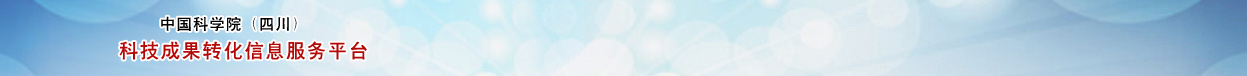
<style>
.page{position:relative;width:1247px;height:76px}
.page>*{position:absolute;margin:0}
.t1{font:15px "CTCuHeiSJ";letter-spacing:0.1em;color:#000000}
.t2{font:19px "CTCuHeiSJ";letter-spacing:0.1em;color:#b30808}
</style>
<div class="page">
<p class="t1" style="left:161px;top:16px;width:136px;height:15px">中国科学院（四川）</p>
<p class="t2" style="left:119px;top:41px;width:248px;height:19px">科技成果转化信息服务平台</p>
</div>
